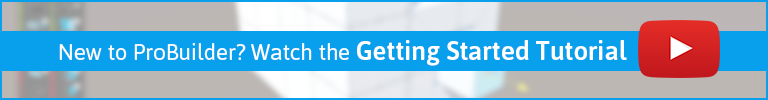
<style>
.page{position:relative;width:768px;height:100px;background:#089fed}
.page>*{position:absolute;margin:0}
.t1{font:22px "Asap-Regular";color:#ffffff}
.t2{font:26px "Asap-Medium";color:#ffffff}
</style>
<div class="page">
<p class="t1" style="left:59px;top:40px;width:568px;height:26px">New to ProBuilder? Watch the <span class="t2">Getting Started Tutorial</span></p>
</div>
